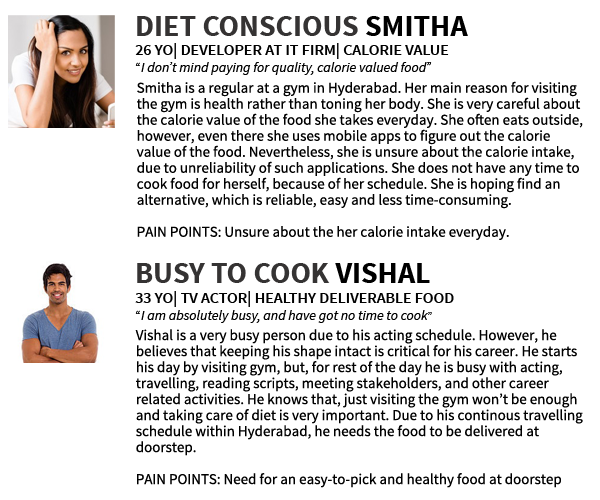
<style>
.page{position:relative;width:600px;height:500px;background:#ffffff}
.page>*{position:absolute;margin:0}
.t1{font:15px/16px "SourceSansPro-Regular";color:#000000}
</style>
<div class="page">
<p class="t1" style="left:136px;top:81px;width:447px;height:159px">Smitha is a regular at a gym in Hyderabad. Her main reason for visiting the gym is health rather than toning her body. She is very careful about the calorie value of the food she takes everyday. She often eats outside, however, even there she uses mobile apps to figure out the calorie value of the food. Nevertheless, she is unsure about the calorie intake, due to unreliability of such applications. She does not have any time to cook food for herself, because of her schedule. She is hoping find an alternative, which is reliable, easy and less time-consuming.<br><br>PAIN POINTS: Unsure about the her calorie intake everyday.</p>
<p class="t1" style="left:135px;top:329px;width:448px;height:159px">Vishal is a very busy person due to his acting schedule. However, he believes that keeping his shape intact is critical for his career. He starts his day by visiting gym, but, for rest of the day he is busy with acting, travelling, reading scripts, meeting stakeholders, and other career related activities. He knows that, just visiting the gym won’t be enough and taking care of diet is very important. Due to his continous travelling schedule within Hyderabad, he needs the food to be delivered at doorstep.<br><br>PAIN POINTS: Need for an easy-to-pick and healthy food at doorstep</p>
</div>
